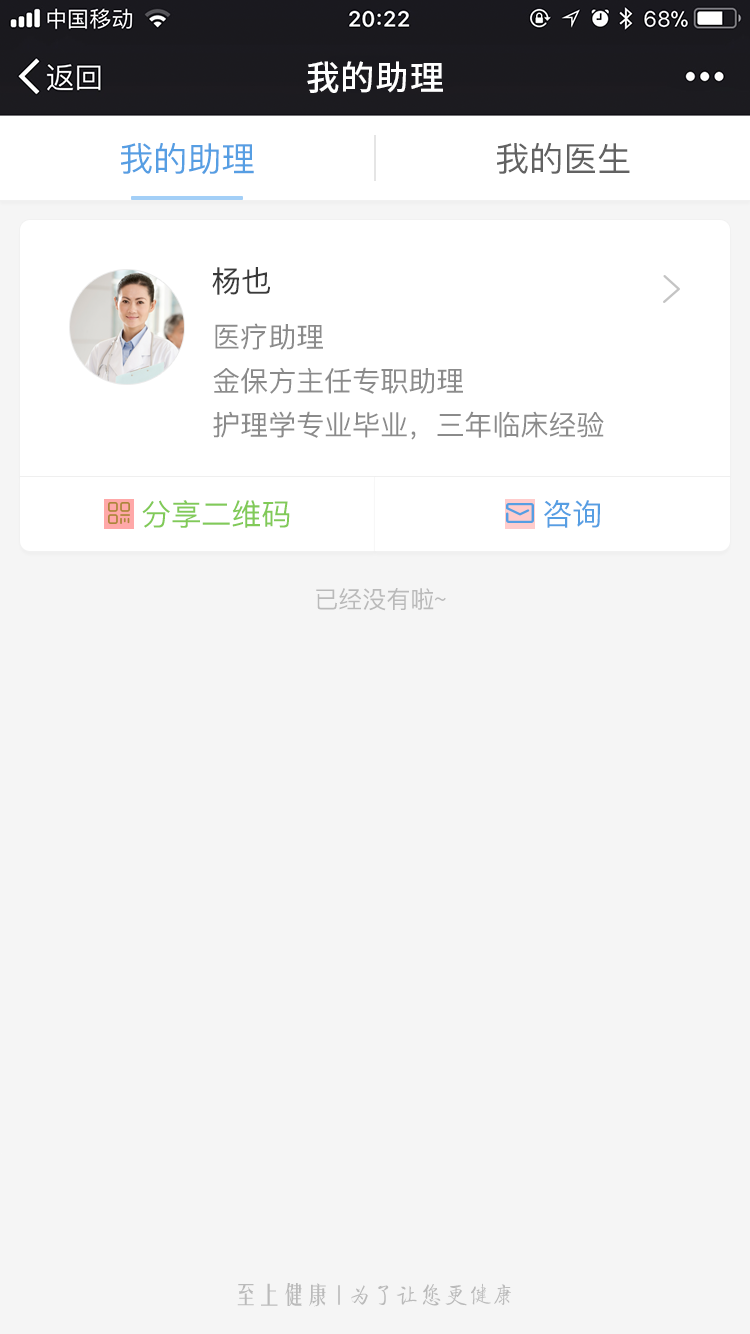
<style>
.page{position:relative;width:750px;height:1334px;background:#f5f5f5}
.page>*{position:absolute;margin:0}
.t1{font:34px "SourceHanSansCN-Medium";letter-spacing:0.02em;color:#ffffff}
.t2{font:34px "PingFangSC-Regular";color:#569ee3}
.t3{font:34px "PingFangSC-Regular";color:#626262}
.t4{font:30px "PingFangSC-Regular";color:#3a3a3a}
.t5{font:28px/44px "PingFangSC-Regular";color:#8b8b8b}
.t6{font:30px "PingFangSC-Regular";color:#81ca58}
.t7{font:30px "PingFangSC-Regular";color:#569ee3}
.t8{font:24px "PingFangSC-Regular";color:#bababa}
.t9{font:24px "FZQTJW--GB1-0";color:#bababa}
.t10{font:24px "FZYTJW--GB1-0";color:#bababa}
</style>
<div class="page">
<p class="t1" style="left:307px;top:61px;width:136px;height:32px">我的助理</p>
<p class="t2" style="left:121px;top:143px;width:133px;height:32px">我的助理</p>
<p class="t3" style="left:497px;top:143px;width:133px;height:31px">我的医生</p>
<p class="t4" style="left:212px;top:267px;width:58px;height:28px">杨也</p>
<p class="t5" style="left:213px;top:323px;width:391px;height:117px">医疗助理<br>金保方主任专职助理<br>护理学专业毕业，三年临床经验</p>
<p class="t6" style="left:142px;top:500px;width:148px;height:28px">分享二维码</p>
<p class="t7" style="left:544px;top:500px;width:56px;height:28px">咨询</p>
<p class="t8" style="left:316px;top:588px;width:130px;height:23px">已经没有啦~</p>
<p class="t9" style="left:237px;top:1283px;width:274px;height:24px"><span class="t10">至上健康   </span>为了让您更健康</p>
</div>
